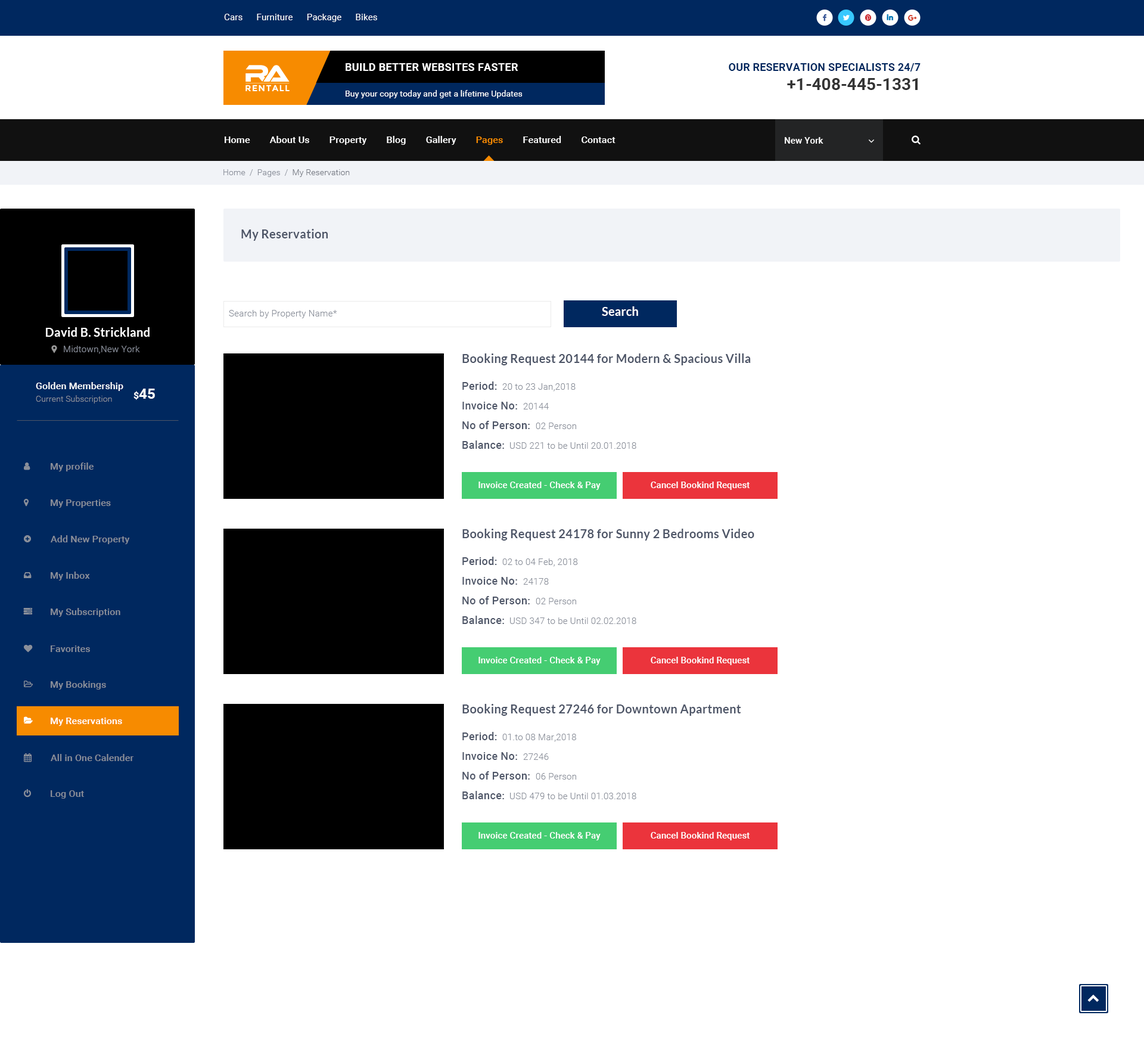
<style>
.page{position:relative;width:1144px;height:1043px;background:#ffffff}
.page>*{position:absolute;margin:0}
.t1{font:8.9px "Roboto-Regular";letter-spacing:0.01em;color:#ffffff}
.t2{font:10.7px "Roboto-Bold";letter-spacing:0.02em;color:#ffffff;text-transform:uppercase}
.t3{font:10.7px "Roboto-Bold";letter-spacing:0.01em;color:#00285f;text-transform:uppercase}
.t4{font:8.7px "Montserrat-Bold";letter-spacing:0.08em;color:#ffffff;text-transform:uppercase}
.t5{font:8.3px "Roboto-Regular";letter-spacing:0.01em;color:#ffffff}
.t6{font:16.7px "Roboto-Bold";color:#333333}
.t7{font:9.5px "Roboto-Medium";letter-spacing:0.01em;color:#ffffff}
.t8{font:9.5px "Roboto-Medium";letter-spacing:0.01em;color:#f78b00}
.t9{font:8.9px "Roboto-Medium";letter-spacing:0.01em;color:#ffffff}
.t10{font:8.3px "Roboto-Light";letter-spacing:0.01em;color:#8a8f9a}
.t11{font:8.3px "Roboto-Light";letter-spacing:0.01em;color:#757983}
.t12{font:11.9px "Lato-Bold";letter-spacing:0.01em;color:#4d5567}
.t13{font:8.9px "Roboto-Light";letter-spacing:0.01em;color:#8a8f9a}
.t14{font:11.9px "Lato-Bold";letter-spacing:0.01em;color:#ffffff}
.t15{font:14.3px "Roboto-Bold";letter-spacing:0.01em;color:#ffffff}
.t16{font:9.5px "Roboto-Bold";letter-spacing:0.01em;color:#ffffff}
.t17{font:10.7px "Roboto-Medium";letter-spacing:0.01em;color:#4d5567}
.t18{font:9.5px "Roboto-Medium";letter-spacing:0.01em;color:#8a8f9a}
</style>
<div class="page">
<p class="t1" style="left:224px;top:14px;width:153px;height:8px">Cars      Furniture      Package      Bikes</p>
<p class="t2" style="left:346px;top:63px;width:172px;height:8px">Build better Websites Faster</p>
<p class="t3" style="left:729px;top:63px;width:191px;height:8px">Our Reservation Specialists 24/7</p>
<p class="t4" style="left:245px;top:85px;width:45px;height:6px">RentAll</p>
<p class="t5" style="left:346px;top:90px;width:176px;height:8px">Buy your copy today and get a lifetime Updates</p>
<p class="t6" style="left:787px;top:78px;width:130px;height:12px">+1-408-445-1331</p>
<p class="t7" style="left:225px;top:136px;width:390px;height:9px">Home        About Us        Property        Blog        Gallery        <span class="t8">Pages</span>        Featured        Contact</p>
<p class="t9" style="left:785px;top:137px;width:38px;height:7px">New York</p>
<p class="t10" style="left:223px;top:169px;width:127px;height:8px">Home  /  Pages  /  <span class="t11">My Reservation</span></p>
<p class="t12" style="left:241px;top:229px;width:87px;height:12px">My Reservation</p>
<p class="t13" style="left:229px;top:310px;width:108px;height:8px">Search by Property Name*</p>
<p class="t14" style="left:602px;top:306px;width:36px;height:10px">Search</p>
<p class="t14" style="left:46px;top:327px;width:104px;height:10px">David B. Strickland</p>
<p class="t13" style="left:64px;top:346px;width:76px;height:8px">Midtown,New York</p>
<p class="t12" style="left:462px;top:353px;width:289px;height:12px">Booking Request 20144 for Modern &amp; Spacious Villa</p>
<p class="t7" style="left:36px;top:382px;width:87px;height:9px">Golden Membership</p>
<p class="t15" style="left:133px;top:388px;width:22px;height:12px"><span class="t16">$</span>45</p>
<p class="t17" style="left:462px;top:381px;width:35px;height:9px">Period:</p>
<p class="t13" style="left:502px;top:383px;width:73px;height:8px">20 to 23 Jan,2018</p>
<p class="t10" style="left:36px;top:395px;width:76px;height:8px">Current Subscription</p>
<p class="t17" style="left:462px;top:402px;width:55px;height:7px">Invoice No:</p>
<p class="t13" style="left:523px;top:403px;width:26px;height:6px">20144</p>
<p class="t17" style="left:462px;top:421px;width:68px;height:8px">No of Person:</p>
<p class="t13" style="left:536px;top:422px;width:40px;height:7px">02 Person</p>
<p class="t17" style="left:462px;top:440px;width:42px;height:9px">Balance:</p>
<p class="t13" style="left:510px;top:442px;width:126px;height:7px">USD 221 to be Until 20.01.2018</p>
<p class="t18" style="left:51px;top:462px;width:43px;height:9px">My profile</p>
<p class="t9" style="left:478px;top:481px;width:122px;height:9px">Invoice Created - Check &amp; Pay</p>
<p class="t9" style="left:651px;top:481px;width:98px;height:9px">Cancel Bookind Request</p>
<p class="t18" style="left:51px;top:499px;width:60px;height:9px">My Properties</p>
<p class="t12" style="left:462px;top:528px;width:292px;height:12px">Booking Request 24178 for Sunny 2 Bedrooms Video</p>
<p class="t18" style="left:51px;top:535px;width:79px;height:9px">Add New Property</p>
<p class="t17" style="left:462px;top:556px;width:35px;height:9px">Period:</p>
<p class="t13" style="left:502px;top:558px;width:76px;height:9px">02 to 04 Feb, 2018</p>
<p class="t18" style="left:51px;top:571px;width:39px;height:9px">My Inbox</p>
<p class="t17" style="left:462px;top:577px;width:55px;height:7px">Invoice No:</p>
<p class="t13" style="left:523px;top:578px;width:26px;height:6px">24178</p>
<p class="t17" style="left:462px;top:596px;width:68px;height:8px">No of Person:</p>
<p class="t13" style="left:536px;top:598px;width:40px;height:6px">02 Person</p>
<p class="t18" style="left:51px;top:608px;width:69px;height:9px">My Subscription</p>
<p class="t17" style="left:462px;top:615px;width:42px;height:9px">Balance:</p>
<p class="t13" style="left:510px;top:617px;width:126px;height:7px">USD 347 to be Until 02.02.2018</p>
<p class="t18" style="left:51px;top:645px;width:39px;height:7px">Favorites</p>
<p class="t9" style="left:478px;top:656px;width:122px;height:9px">Invoice Created - Check &amp; Pay</p>
<p class="t9" style="left:651px;top:656px;width:98px;height:9px">Cancel Bookind Request</p>
<p class="t18" style="left:51px;top:680px;width:55px;height:9px">My Bookings</p>
<p class="t12" style="left:462px;top:704px;width:279px;height:11px">Booking Request 27246 for Downtown Apartment</p>
<p class="t7" style="left:51px;top:717px;width:71px;height:9px">My Reservations</p>
<p class="t17" style="left:462px;top:732px;width:35px;height:8px">Period:</p>
<p class="t13" style="left:502px;top:733px;width:74px;height:9px">01.to 08 Mar,2018</p>
<p class="t18" style="left:51px;top:754px;width:82px;height:7px">All in One Calender</p>
<p class="t17" style="left:462px;top:752px;width:55px;height:8px">Invoice No:</p>
<p class="t13" style="left:523px;top:753px;width:26px;height:7px">27246</p>
<p class="t17" style="left:462px;top:771px;width:68px;height:8px">No of Person:</p>
<p class="t13" style="left:536px;top:773px;width:40px;height:6px">06 Person</p>
<p class="t18" style="left:51px;top:790px;width:33px;height:8px">Log Out</p>
<p class="t17" style="left:462px;top:791px;width:42px;height:8px">Balance:</p>
<p class="t13" style="left:510px;top:792px;width:126px;height:7px">USD 479 to be Until 01.03.2018</p>
<p class="t9" style="left:478px;top:832px;width:122px;height:8px">Invoice Created - Check &amp; Pay</p>
<p class="t9" style="left:651px;top:832px;width:98px;height:8px">Cancel Bookind Request</p>
</div>
